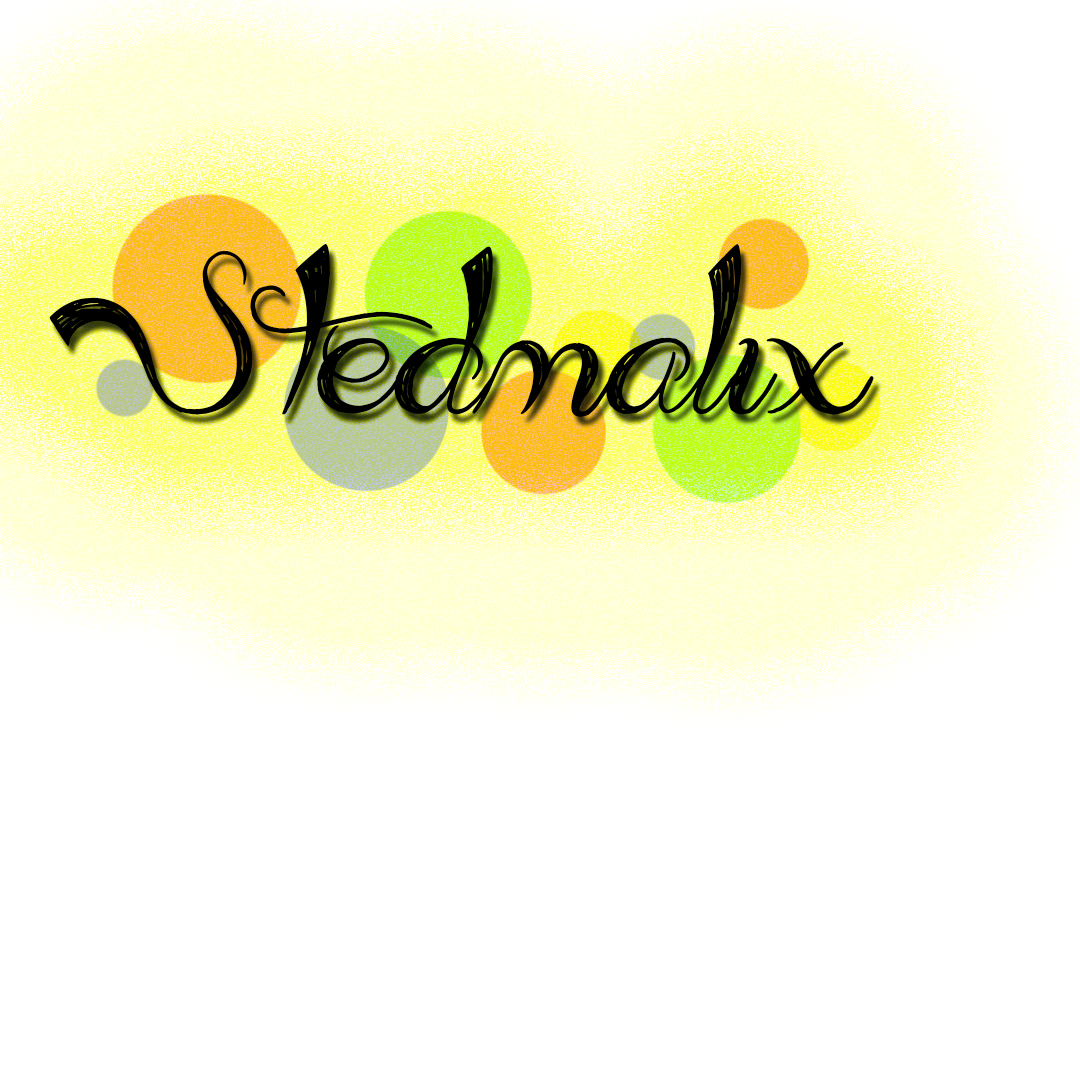
<style>
.page{position:relative;width:1080px;height:1080px;background:#ffffff}
.page>*{position:absolute;margin:0}
.t1{font:152.4px "AdmirationPains";color:#000000}
</style>
<div class="page">
<p class="t1" style="left:49px;top:243px;width:825px;height:174px">S tedmalix</p>
</div>
